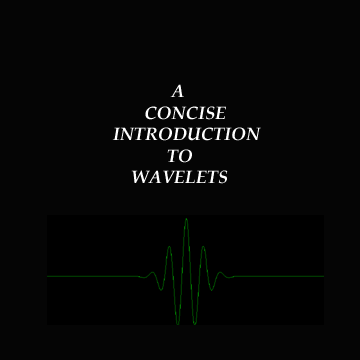
<style>
.page{position:relative;width:360px;height:360px;background:#050505}
.page>*{position:absolute;margin:0}
.t1{font:17.1px "BookAntiqua-BoldItalic";color:#ffffff}
.t2{font:17.1px "BookAntiqua";color:#ffffff}
</style>
<div class="page">
<p class="t1" style="left:112px;top:84px;width:149px;height:100px"><span class="t2">     </span>        A <br>       CONCISE<br>INTRODUCTION<br>            TO<br>    WAVELETS</p>
</div>
